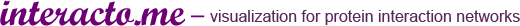
<style>
.page{position:relative;width:520px;height:26px;background:#ffffff}
.page>*{position:absolute;margin:0}
.t1{font:40px "ScriptMTBold";color:#6e0075}
.t2{font:24px "Georgia";color:#6e0075}
.t3{font:16px "ArialMT";color:#552758}
</style>
<div class="page">
<p class="t1" style="left:0px;top:0px;width:185px;height:26px">interacto.me</p>
<p class="t2" style="left:191px;top:15px;width:14px;height:3px">–</p>
<p class="t3" style="left:210px;top:10px;width:310px;height:15px">visualization for protein interaction networks</p>
</div>
